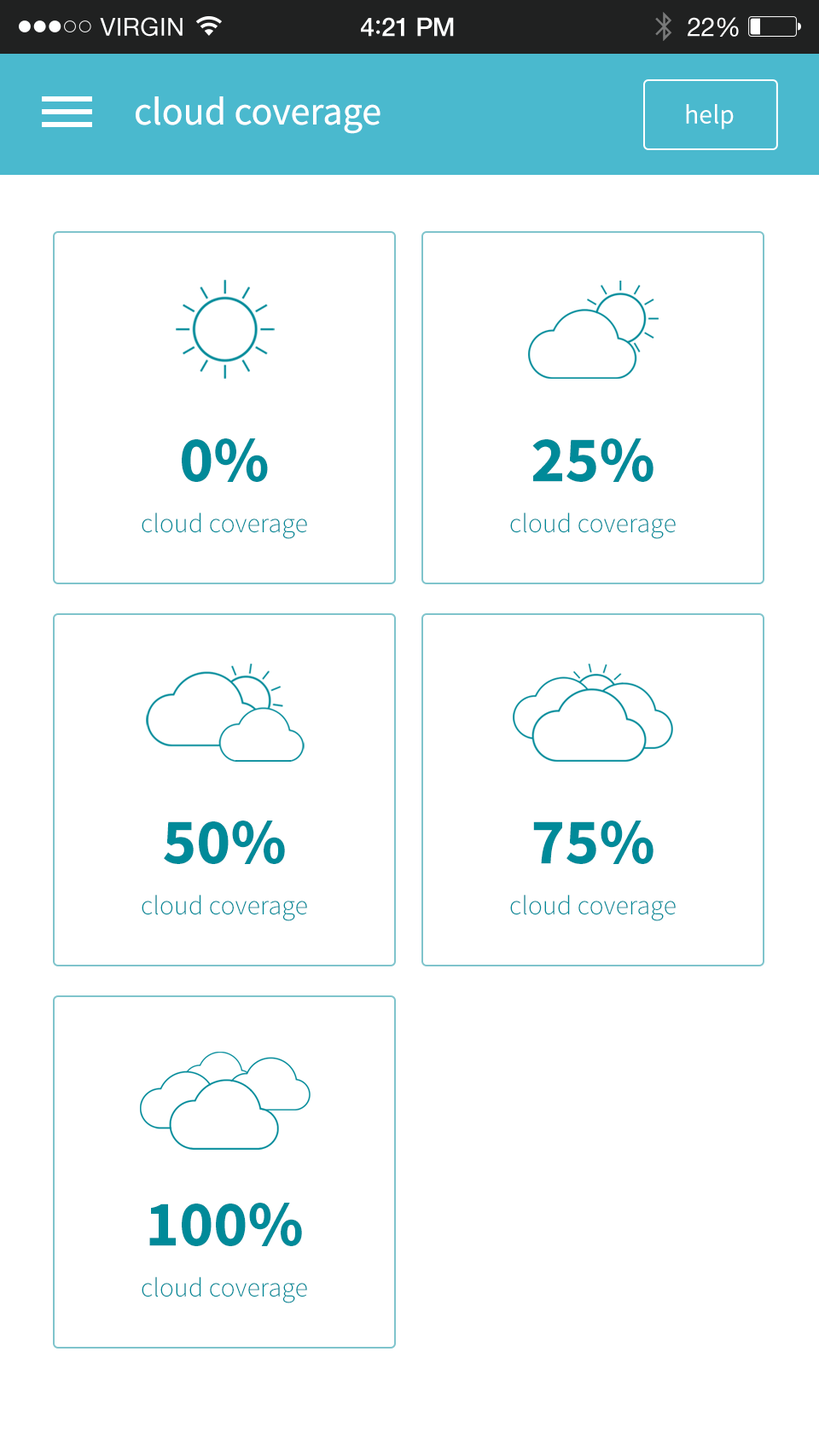
<style>
.page{position:relative;width:819px;height:1456px;background:#ffffff}
.page>*{position:absolute;margin:0}
.t1{font:39.2px "SourceSansPro-Regular";color:#ffffff}
.t2{font:27.3px "SourceSansPro-Regular";color:#ffffff}
.t3{font:64.8px "SourceSansPro-Bold";color:#008a99}
.t4{font:27.3px "SourceSansPro-Light";color:#008a99}
</style>
<div class="page">
<p class="t1" style="left:136px;top:96px;width:244px;height:38px">cloud coverage</p>
<p class="t2" style="left:686px;top:104px;width:48px;height:26px">help</p>
<p class="t3" style="left:182px;top:438px;width:86px;height:44px">0%</p>
<p class="t3" style="left:532px;top:438px;width:121px;height:44px">25%</p>
<p class="t4" style="left:142px;top:513px;width:165px;height:26px">cloud coverage</p>
<p class="t4" style="left:510px;top:513px;width:166px;height:26px">cloud coverage</p>
<p class="t3" style="left:164px;top:821px;width:121px;height:43px">50%</p>
<p class="t3" style="left:533px;top:821px;width:120px;height:43px">75%</p>
<p class="t4" style="left:142px;top:895px;width:165px;height:26px">cloud coverage</p>
<p class="t4" style="left:510px;top:895px;width:166px;height:26px">cloud coverage</p>
<p class="t3" style="left:149px;top:1203px;width:153px;height:43px">100%</p>
<p class="t4" style="left:142px;top:1277px;width:165px;height:26px">cloud coverage</p>
</div>
